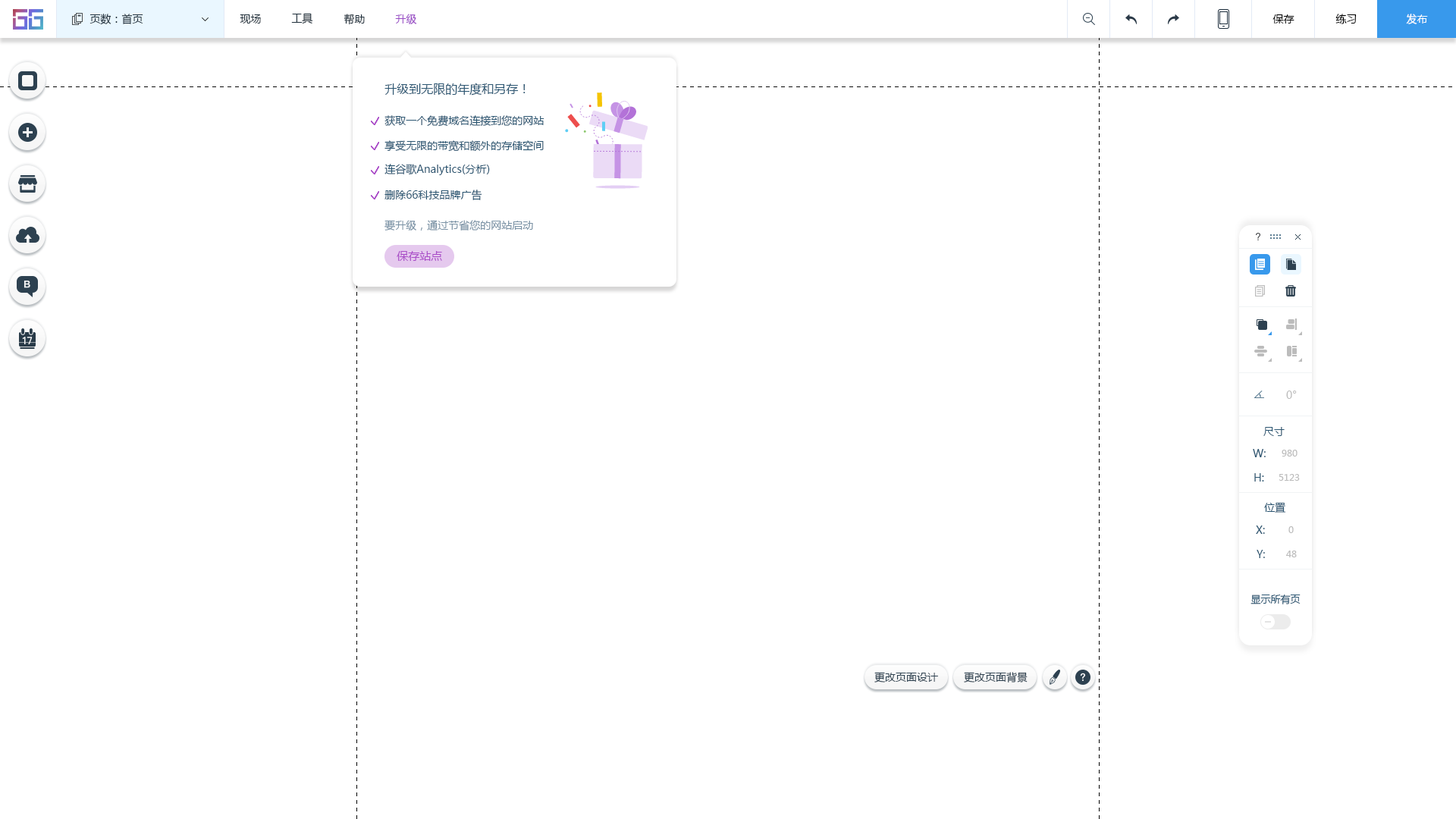
<style>
.page{position:relative;width:1456px;height:819px;background:#ffffff}
.page>*{position:absolute;margin:0}
.t1{font:10.6px "MicrosoftYaHei";color:#20303c}
.t2{font:10.6px "MicrosoftYaHei";color:#9a4cc6}
.t3{font:10.6px "MicrosoftYaHei";color:#000000}
.t4{font:10.6px "MicrosoftYaHei";color:#ffffff}
.t5{font:12.1px "MicrosoftYaHei";color:#2b5672}
.t6{font:10.6px "MicrosoftYaHei";color:#2b5672}
.t7{font:10.6px "MicrosoftYaHei";color:#7a92a5}
.t8{font:11.4px "MicrosoftYaHei";color:#aa4dc8}
.t9{font:10.6px "MicrosoftYaHei";color:#bcbcbc}
.t10{font:9.1px "MicrosoftYaHei";color:#bcbcbc}
.t11{font:9.9px "MicrosoftYaHei";color:#2b5672}
.t12{font:10.6px "MicrosoftYaHei";color:#2d4150}
</style>
<div class="page">
<p class="t1" style="left:89px;top:14px;width:54px;height:11px">页数：首页</p>
<p class="t1" style="left:240px;top:14px;width:21px;height:10px">现场</p>
<p class="t1" style="left:291px;top:13px;width:22px;height:11px">工具</p>
<p class="t1" style="left:344px;top:14px;width:21px;height:11px">帮助</p>
<p class="t2" style="left:395px;top:14px;width:22px;height:10px">升级</p>
<p class="t3" style="left:1272px;top:14px;width:22px;height:10px">保存</p>
<p class="t3" style="left:1335px;top:14px;width:22px;height:10px">练习</p>
<p class="t4" style="left:1406px;top:14px;width:22px;height:10px">发布</p>
<p class="t5" style="left:384px;top:83px;width:142px;height:13px">升级到无限的年度和另存！</p>
<p class="t6" style="left:384px;top:115px;width:160px;height:12px">获取一个免费域名连接到您的网站</p>
<p class="t6" style="left:384px;top:140px;width:160px;height:12px">享受无限的带宽和额外的存储空间</p>
<p class="t6" style="left:384px;top:164px;width:106px;height:11px">连谷歌Analytics(分析)</p>
<p class="t6" style="left:384px;top:190px;width:98px;height:10px">删除66科技品牌广告</p>
<p class="t7" style="left:384px;top:220px;width:149px;height:11px">要升级，通过节省您的网站启动</p>
<p class="t8" style="left:397px;top:251px;width:45px;height:10px">保存站点</p>
<p class="t9" style="left:1286px;top:391px;width:11px;height:8px">0°</p>
<p class="t6" style="left:1263px;top:427px;width:22px;height:9px">尺寸</p>
<p class="t6" style="left:1253px;top:449px;width:13px;height:8px">W:</p>
<p class="t10" style="left:1282px;top:450px;width:15px;height:7px">980</p>
<p class="t6" style="left:1254px;top:473px;width:10px;height:9px">H:</p>
<p class="t10" style="left:1279px;top:474px;width:21px;height:7px">5123</p>
<p class="t6" style="left:1264px;top:502px;width:22px;height:11px">位置</p>
<p class="t6" style="left:1256px;top:526px;width:9px;height:8px">X:</p>
<p class="t10" style="left:1288px;top:526px;width:6px;height:7px">0</p>
<p class="t6" style="left:1257px;top:550px;width:8px;height:8px">Y:</p>
<p class="t10" style="left:1286px;top:551px;width:11px;height:6px">48</p>
<p class="t11" style="left:1250px;top:594px;width:51px;height:10px">显示所有页</p>
<p class="t12" style="left:874px;top:672px;width:64px;height:10px">更改页面设计</p>
<p class="t12" style="left:964px;top:672px;width:64px;height:10px">更改页面背景</p>
</div>
